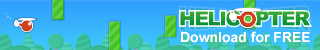
<style>
.page{position:relative;width:320px;height:50px}
.page>*{position:absolute;margin:0}
.t1{font:14px "Arial-BoldMT";color:#ffffff}
</style>
<div class="page">
<p class="t1" style="left:181px;top:31px;width:129px;height:12px">Download for FREE</p>
</div>
